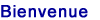
<style>
.page{position:relative;width:100px;height:20px;background:#ffffff}
.page>*{position:absolute;margin:0}
.t1{font:16.7px "ArialMT";letter-spacing:0.04em;color:#000099;font-weight:bold}
</style>
<div class="page">
<p class="t1" style="left:1px;top:5px;width:87px;height:13px">Bienvenue</p>
</div>
